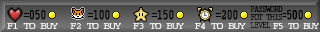
<style>
.page{position:relative;width:320px;height:32px}
.page>*{position:absolute;margin:0}
.t1{font:10px/8px "Courier";color:#000000;scale:0.7 1}
.t2{font:15px "Courier";color:#000000;font-weight:bold;scale:0.67 1}
.t3{font:15px "Courier";color:#000000;font-weight:bold;scale:0.47 1}
.t4{font:10px "Courier";color:#ffffff}
.t5{font:10px "Courier";color:#ffffff;scale:0.9 1}
</style>
<div class="page">
<p class="t1" style="left:250px;top:6px;width:33px;height:22px">PASSWORD<br>FOT THIS<br>LEVEL</p>
<p class="t2" style="left:23px;top:10px;width:23px;height:10px">=050</p>
<p class="t2" style="left:87px;top:10px;width:23px;height:10px">=100</p>
<p class="t2" style="left:151px;top:10px;width:23px;height:10px">=150</p>
<p class="t2" style="left:215px;top:10px;width:23px;height:10px">=200</p>
<p class="t2" style="left:282px;top:10px;width:21px;height:10px"><span class="t3">=</span>500</p>
<p class="t4" style="left:7px;top:23px;width:51px;height:6px">F1 TO BUY</p>
<p class="t4" style="left:70px;top:23px;width:51px;height:6px">F2 TO BUY</p>
<p class="t4" style="left:133px;top:23px;width:51px;height:6px">F3 TO BUY</p>
<p class="t4" style="left:195px;top:23px;width:51px;height:6px">F4 TO BUY</p>
<p class="t5" style="left:273px;top:23px;width:46px;height:6px">F5 TO BUY</p>
</div>
